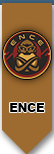
<style>
.page{position:relative;width:54px;height:154px;background:#9d6a2f}
.page>*{position:absolute;margin:0}
.t1{font:11.7px "Arial-Black";letter-spacing:-0.01em;color:#000000}
</style>
<div class="page">
<p class="t1" style="left:10px;top:103px;width:35px;height:9px">ENCE</p>
</div>
